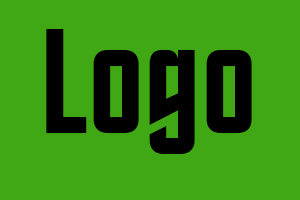
<style>
.page{position:relative;width:300px;height:200px;background:#40a814}
.page>*{position:absolute;margin:0}
.t1{font:150px "FinalFrontierOldStyle";color:#000000}
</style>
<div class="page">
<p class="t1" style="left:46px;top:29px;width:206px;height:125px">Logo</p>
</div>
